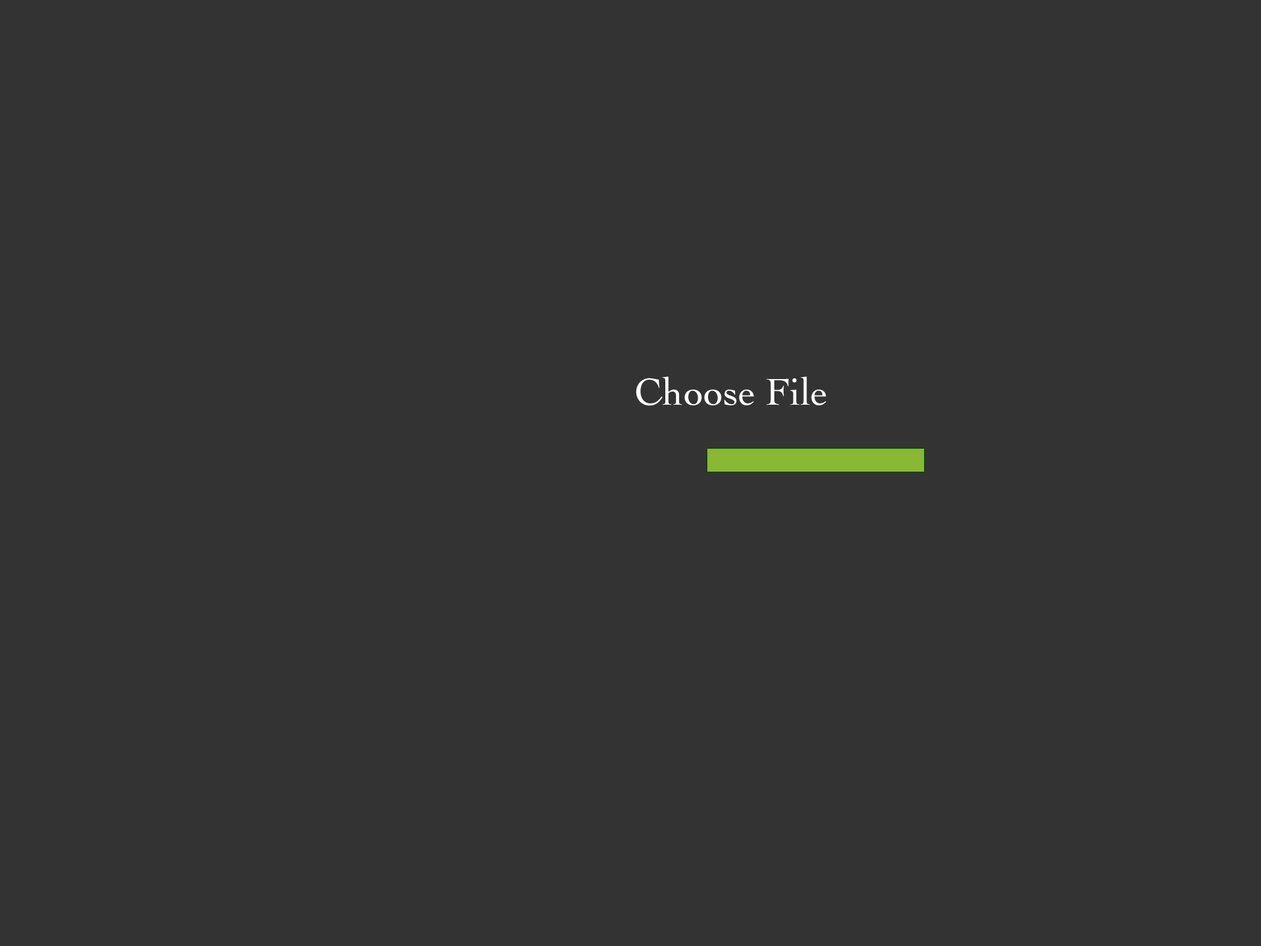
<style>
.page{position:relative;width:1261px;height:946px;background:#333333}
.page>*{position:absolute;margin:0}
.t1{font:39.4px "Cochin";color:#ffffff}
</style>
<div class="page">
<p class="t1" style="left:636px;top:376px;width:190px;height:30px">Choose File</p>
</div>
